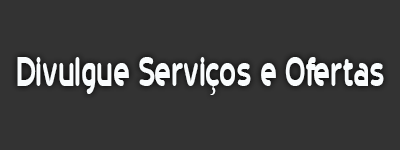
<style>
.page{position:relative;width:400px;height:150px;background:#333333}
.page>*{position:absolute;margin:0}
.t1{font:48.4px "20thCenturyFont";color:#f9fcfd;scale:0.67 1}
</style>
<div class="page">
<p class="t1" style="left:17px;top:57px;width:367px;height:38px">Divulgue Serviços e Ofertas</p>
</div>
